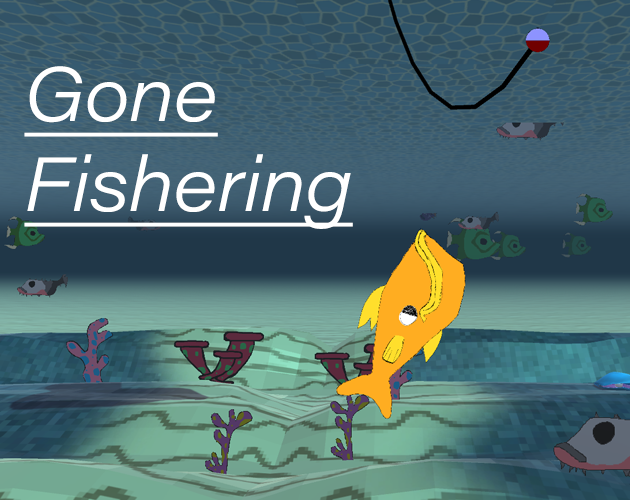
<style>
.page{position:relative;width:630px;height:500px}
.page>*{position:absolute;margin:0}
.t1{font:75px "AcuminConcept-WideLightItalic";letter-spacing:-0.01em;color:#ffffff;text-decoration:underline}
</style>
<div class="page">
<p class="t1" style="left:24px;top:66px;width:329px;height:163px">Gone<br>Fishering</p>
</div>
